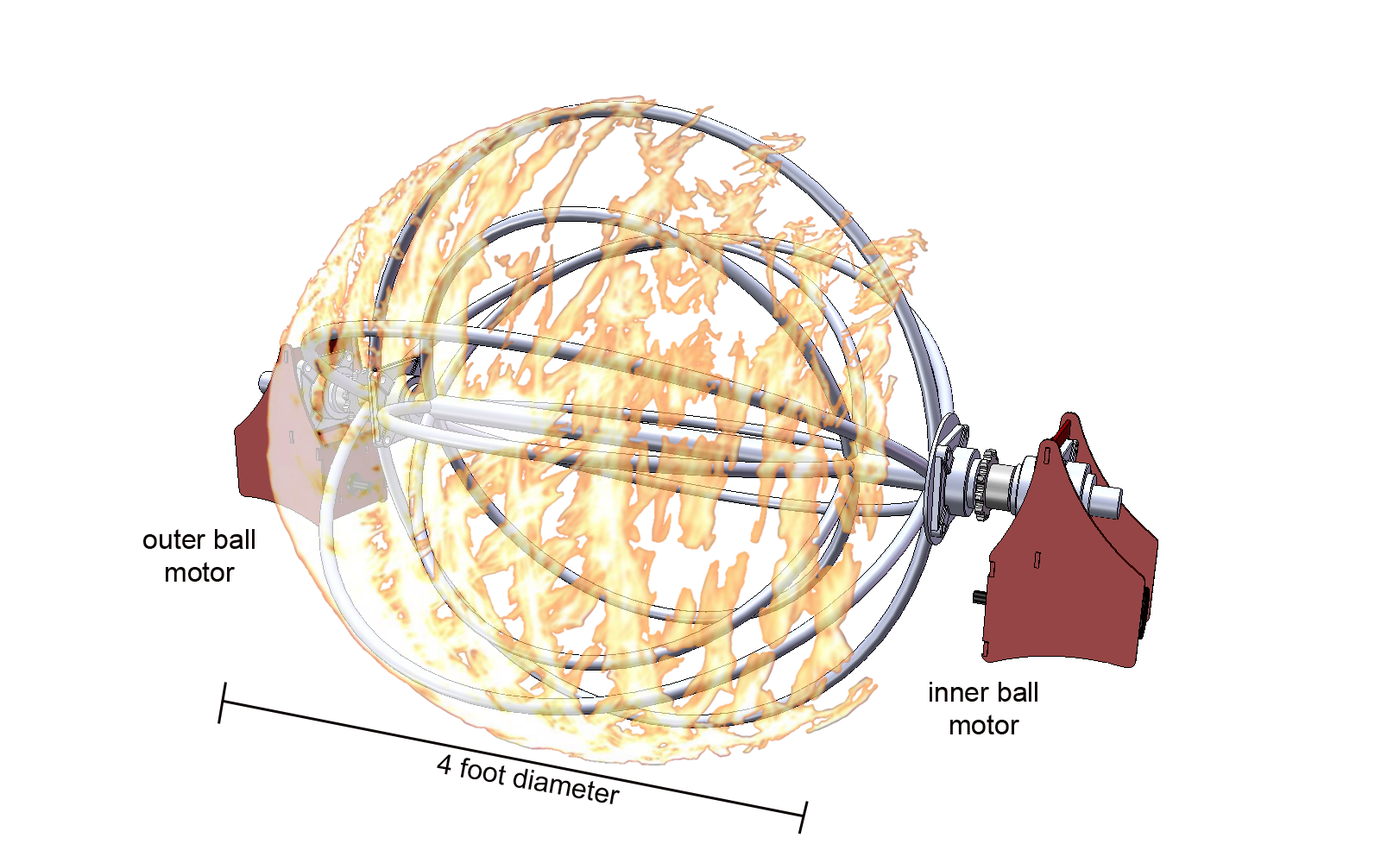
<style>
.page{position:relative;width:1381px;height:863px;background:#ffffff}
.page>*{position:absolute;margin:0}
.t1{font:27.6px "ArialMT";color:#0b0403}
</style>
<div class="page">
<p class="t1" style="left:143px;top:529px;width:112px;height:53px;text-align:center">outer ball<br>motor</p>
<p class="t1" style="left:930px;top:682px;width:108px;height:53px;text-align:center">inner ball<br>motor</p>
<p class="t1" style="left:437px;top:755px;width:184px;height:50px;rotate:10deg">4 foot diameter</p>
</div>
